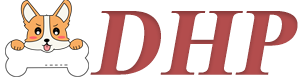
<style>
.page{position:relative;width:300px;height:80px;background:#ffffff}
.page>*{position:absolute;margin:0}
.t1{font:95.9px "David-Bold";color:#b34d4d;font-style:italic}
</style>
<div class="page">
<p class="t1" style="left:90px;top:11px;width:208px;height:64px">DHP</p>
</div>
